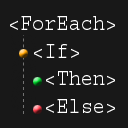
<style>
.page{position:relative;width:128px;height:128px;background:#181818}
.page>*{position:absolute;margin:0}
.t1{font:23px "Courier";color:#ffffff;scale:0.88 1}
</style>
<div class="page">
<p class="t1" style="left:10px;top:16px;width:105px;height:97px">&lt;ForEach&gt;<br>  &lt;If&gt;<br>   &lt;Then&gt;<br>   &lt;Else&gt;</p>
</div>
